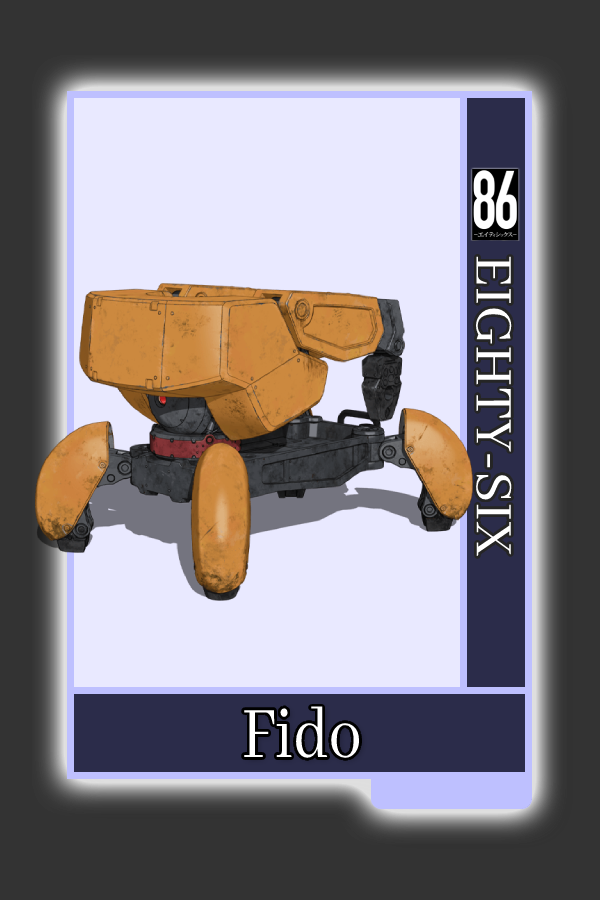
<style>
.page{position:relative;width:600px;height:900px;background:#e9e9ff}
.page>*{position:absolute;margin:0}
.t1{font:58.2px "AbhayaLibre-Regular";color:#ffffff}
.t2{font:79.6px "AbhayaLibre-Regular";color:#ffffff;scale:0.83 1}
</style>
<div class="page">
<p class="t1" style="left:476px;top:256px;width:36px;height:300px;rotate:90deg">EIGHTY-SIX</p>
<p class="t2" style="left:244px;top:706px;width:116px;height:52px">Fido</p>
</div>
